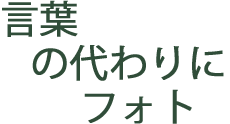
<style>
.page{position:relative;width:230px;height:124px;background:#ffffff}
.page>*{position:absolute;margin:0}
.t1{font:38.5px/43.9px "KozGoPr6N-Regular";color:#193a23;font-weight:bold}
</style>
<div class="page">
<p class="t1" style="left:2px;top:0px;width:222px;height:124px;opacity:0.9">言葉<br>   の代わりに<br>        フォト</p>
</div>
